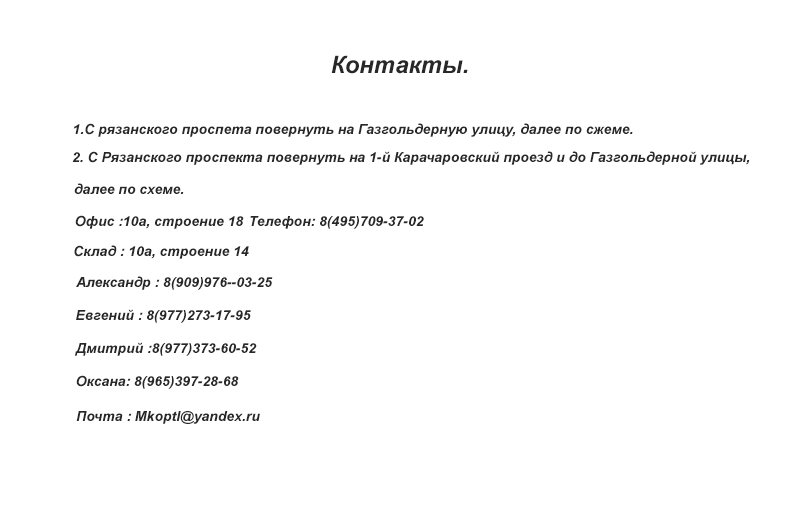
<style>
.page{position:relative;width:800px;height:510px;background:#ffffff}
.page>*{position:absolute;margin:0}
.t1{font:24px "Arial-BoldItalicMT";color:#282828}
.t2{font:14px "Arial-BoldItalicMT";color:#282828}
</style>
<div class="page">
<p class="t1" style="left:331px;top:55px;width:137px;height:19px">Контакты.</p>
<p class="t2" style="left:74px;top:123px;width:559px;height:14px">1.С рязанского проспета повернуть на Газгольдерную улицу, далее по сжеме.</p>
<p class="t2" style="left:72px;top:151px;width:678px;height:14px">2. С Рязанского проспекта повернуть на 1-й Карачаровский проезд и до Газгольдерной улицы,</p>
<p class="t2" style="left:74px;top:183px;width:110px;height:11px">далее по схеме.</p>
<p class="t2" style="left:75px;top:215px;width:169px;height:14px">Офис :10а, строение 18</p>
<p class="t2" style="left:250px;top:216px;width:174px;height:13px">Телефон: 8(495)709-37-02</p>
<p class="t2" style="left:74px;top:245px;width:175px;height:14px">Склад : 10а, строение 14</p>
<p class="t2" style="left:76px;top:276px;width:197px;height:14px">Александр : 8(909)976--03-25</p>
<p class="t2" style="left:76px;top:309px;width:175px;height:14px">Евгений : 8(977)273-17-95</p>
<p class="t2" style="left:75px;top:342px;width:182px;height:14px">Дмитрий :8(977)373-60-52</p>
<p class="t2" style="left:76px;top:375px;width:163px;height:14px">Оксана: 8(965)397-28-68</p>
<p class="t2" style="left:76px;top:411px;width:184px;height:13px">Почта : Mkoptl@yandex.ru</p>
</div>
